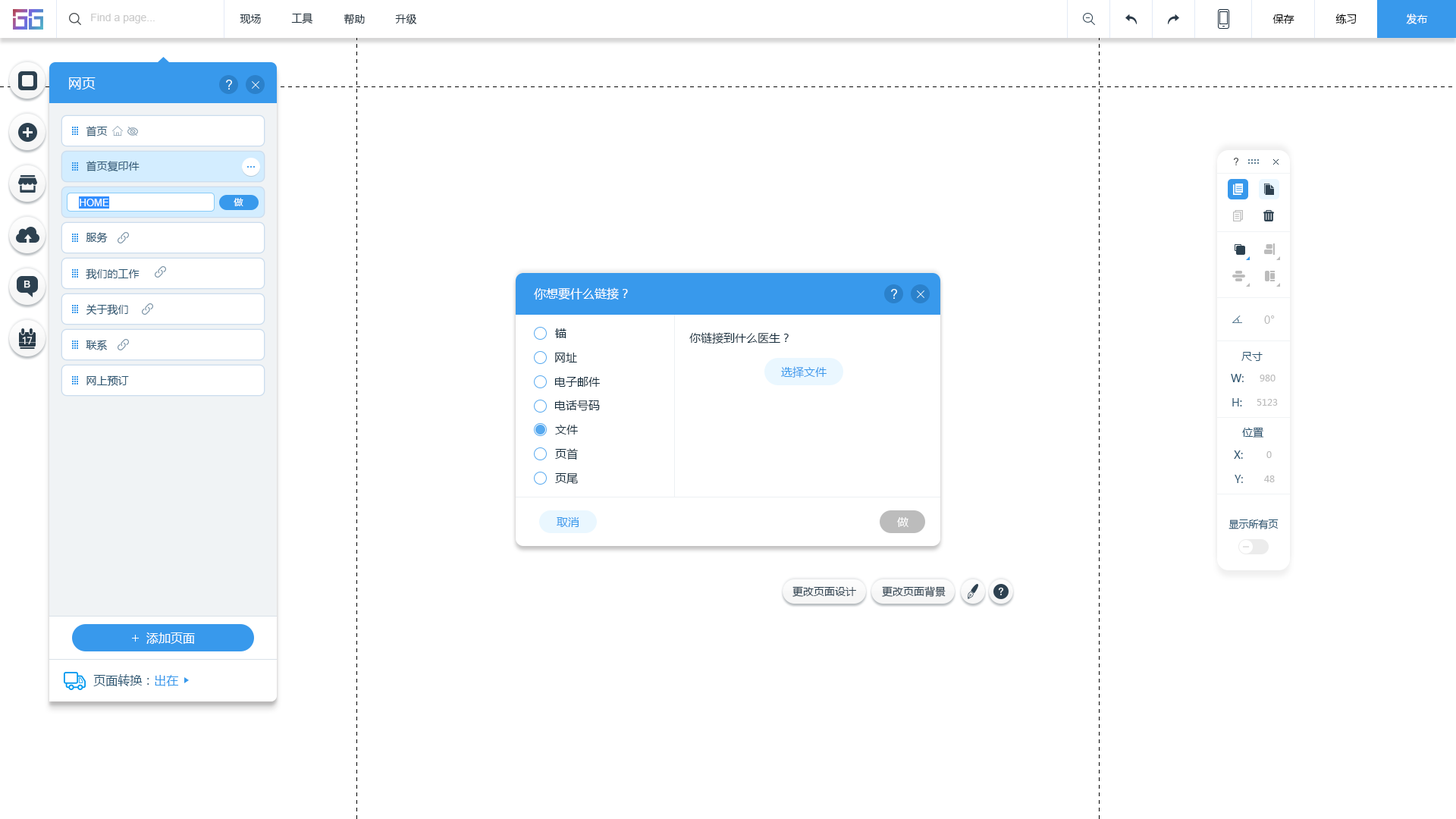
<style>
.page{position:relative;width:1456px;height:819px;background:#ffffff}
.page>*{position:absolute;margin:0}
.t1{font:10.6px "ArialMT";color:#cccccc}
.t2{font:10.6px "MicrosoftYaHei";color:#20303c}
.t3{font:10.6px "MicrosoftYaHei";color:#000000}
.t4{font:10.6px "MicrosoftYaHei";color:#ffffff}
.t5{font:13.6px "MicrosoftYaHei";color:#ffffff}
.t6{font:10.6px "MicrosoftYaHei";color:#2b5672}
.t7{font:9.1px "MicrosoftYaHei";color:#ffffff}
.t8{font:9.9px "ArialMT";color:#ffffff}
.t9{font:12.1px "MicrosoftYaHei";color:#ffffff}
.t10{font:10.6px "MicrosoftYaHei";color:#bcbcbc}
.t11{font:11.4px "MicrosoftYaHei";color:#162d3d}
.t12{font:11.4px "MicrosoftYaHei";color:#3899ec}
.t13{font:9.1px "MicrosoftYaHei";color:#bcbcbc}
.t14{font:11.4px "MicrosoftYaHei";color:#ffffff}
.t15{font:9.9px "MicrosoftYaHei";color:#2b5672}
.t16{font:10.6px "MicrosoftYaHei";color:#2d4150}
.t17{font:9.1px "MicrosoftYaHei";color:#2b5672}
.t18{font:9.1px "MicrosoftYaHei";color:#3899ec}
</style>
<div class="page">
<p class="t1" style="left:91px;top:14px;width:64px;height:10px">Find a page...</p>
<p class="t2" style="left:240px;top:14px;width:21px;height:10px">现场</p>
<p class="t2" style="left:291px;top:13px;width:22px;height:11px">工具</p>
<p class="t2" style="left:344px;top:14px;width:21px;height:11px">帮助</p>
<p class="t2" style="left:395px;top:14px;width:22px;height:10px">升级</p>
<p class="t3" style="left:1272px;top:14px;width:22px;height:10px">保存</p>
<p class="t3" style="left:1335px;top:14px;width:22px;height:10px">练习</p>
<p class="t4" style="left:1406px;top:14px;width:22px;height:10px">发布</p>
<p class="t5" style="left:69px;top:77px;width:27px;height:12px">网页</p>
<p class="t6" style="left:86px;top:126px;width:22px;height:10px">首页</p>
<p class="t6" style="left:86px;top:161px;width:54px;height:11px">首页复印件</p>
<p class="t7" style="left:234px;top:198px;width:9px;height:8px">做</p>
<p class="t8" style="left:80px;top:199px;width:29px;height:7px">HOME</p>
<p class="t6" style="left:86px;top:232px;width:22px;height:11px">服务</p>
<p class="t6" style="left:86px;top:268px;width:54px;height:12px">我们的工作</p>
<p class="t9" style="left:534px;top:287px;width:94px;height:13px">你想要什么链接？</p>
<p class="t6" style="left:86px;top:304px;width:42px;height:11px">关于我们</p>
<p class="t10" style="left:1264px;top:315px;width:11px;height:9px">0°</p>
<p class="t11" style="left:555px;top:328px;width:11px;height:10px">锚</p>
<p class="t6" style="left:86px;top:340px;width:21px;height:10px">联系</p>
<p class="t11" style="left:689px;top:332px;width:100px;height:12px">你链接到什么医生？</p>
<p class="t11" style="left:555px;top:353px;width:22px;height:9px">网址</p>
<p class="t6" style="left:1241px;top:352px;width:22px;height:9px">尺寸</p>
<p class="t6" style="left:86px;top:375px;width:43px;height:11px">网上预订</p>
<p class="t11" style="left:554px;top:377px;width:46px;height:10px">电子邮件</p>
<p class="t12" style="left:781px;top:366px;width:46px;height:12px">选择文件</p>
<p class="t6" style="left:1231px;top:374px;width:13px;height:8px">W:</p>
<p class="t13" style="left:1260px;top:375px;width:15px;height:6px">980</p>
<p class="t11" style="left:554px;top:400px;width:46px;height:11px">电话号码</p>
<p class="t6" style="left:1232px;top:398px;width:10px;height:8px">H:</p>
<p class="t13" style="left:1257px;top:399px;width:21px;height:7px">5123</p>
<p class="t11" style="left:555px;top:425px;width:23px;height:10px">文件</p>
<p class="t6" style="left:1242px;top:427px;width:22px;height:11px">位置</p>
<p class="t11" style="left:555px;top:448px;width:23px;height:12px">页首</p>
<p class="t6" style="left:1234px;top:450px;width:9px;height:9px">X:</p>
<p class="t13" style="left:1266px;top:451px;width:6px;height:7px">0</p>
<p class="t11" style="left:555px;top:473px;width:23px;height:11px">页尾</p>
<p class="t6" style="left:1235px;top:475px;width:8px;height:8px">Y:</p>
<p class="t13" style="left:1264px;top:475px;width:11px;height:7px">48</p>
<p class="t12" style="left:557px;top:517px;width:22px;height:10px">取消</p>
<p class="t14" style="left:897px;top:517px;width:11px;height:10px">做</p>
<p class="t15" style="left:1228px;top:519px;width:51px;height:10px">显示所有页</p>
<p class="t16" style="left:792px;top:586px;width:64px;height:11px">更改页面设计</p>
<p class="t16" style="left:882px;top:586px;width:64px;height:11px">更改页面背景</p>
<p class="t9" style="left:146px;top:632px;width:49px;height:12px">添加页面</p>
<p class="t17" style="left:93px;top:674px;width:86px;height:12px">页面转换：<span class="t18">出在</span></p>
</div>
